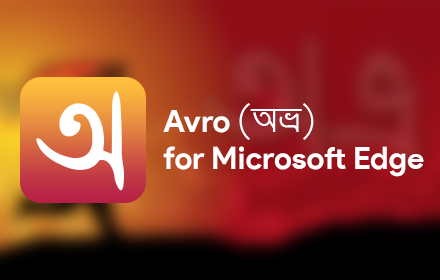
<style>
.page{position:relative;width:440px;height:280px}
.page>*{position:absolute;margin:0}
.t1{font:30.9px "ProductSans-Bold";color:#ffffff}
.t2{font:30.9px "SiyamRupaliANSI";color:#ffffff}
</style>
<div class="page">
<p class="t1" style="left:163px;top:103px;width:261px;height:74px">Avro <span class="t2">(Aå) <br></span>for Microsoft Edge</p>
</div>
